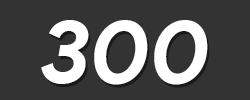
<style>
.page{position:relative;width:250px;height:100px;background:#333333}
.page>*{position:absolute;margin:0}
.t1{font:90px "ProductSans-BoldItalic";color:#ffffff}
</style>
<div class="page">
<p class="t1" style="left:41px;top:20px;width:167px;height:65px">300</p>
</div>
